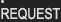
<style>
.page{position:relative;width:61px;height:22px;background:#232323}
.page>*{position:absolute;margin:0}
.t1{font:15px "ArialNarrow";color:#dfdfdf}
</style>
<div class="page">
<p class="t1" style="left:1px;top:7px;width:59px;height:13px">REQUEST</p>
</div>
